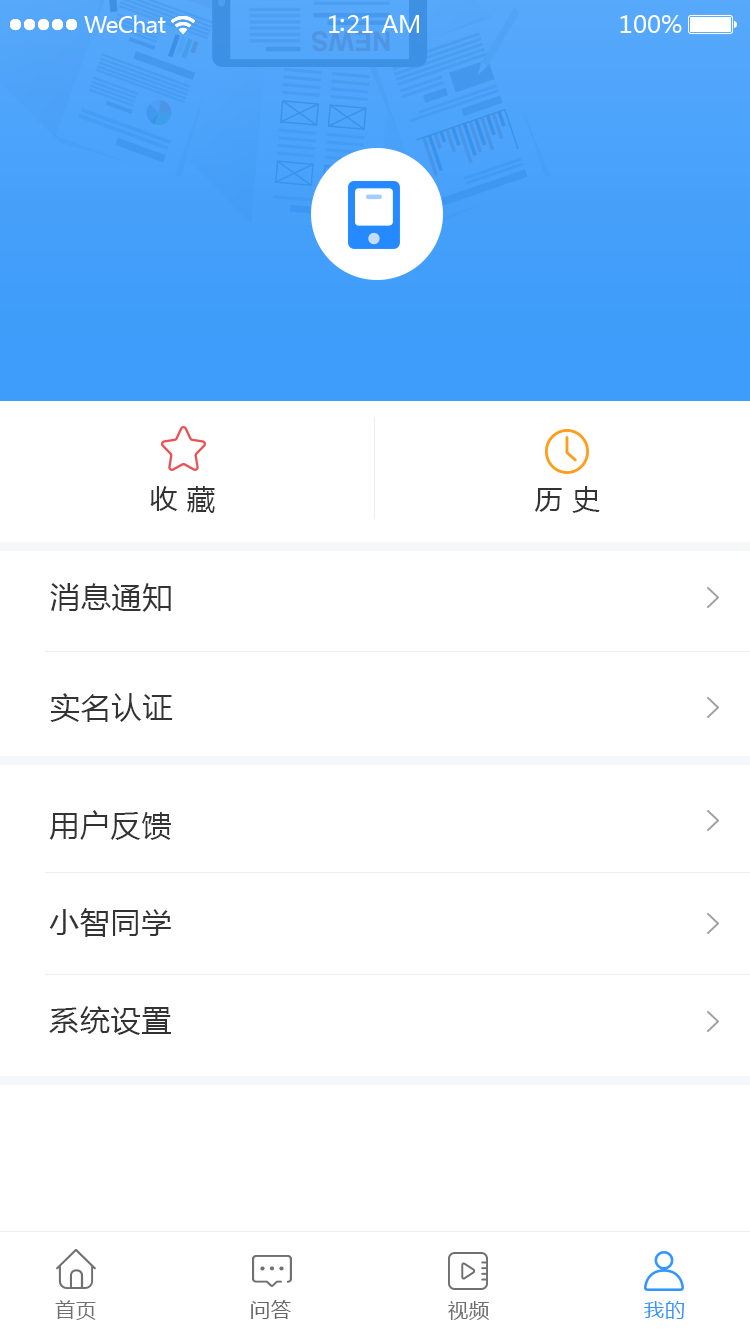
<style>
.page{position:relative;width:750px;height:1335px;background:#ffffff}
.page>*{position:absolute;margin:0}
.t1{font:28px "MicrosoftYaHei";letter-spacing:0.025em;color:#333333}
.t2{font:30px "MicrosoftYaHei";letter-spacing:0.025em;color:#333333}
.t3{font:20px "MicrosoftYaHei";letter-spacing:0.05em;color:#707070}
.t4{font:20px "MicrosoftYaHei";letter-spacing:0.05em;color:#666666}
.t5{font:20px "MicrosoftYaHei";letter-spacing:0.05em;color:#3296fa}
</style>
<div class="page">
<p class="t1" style="left:150px;top:486px;width:65px;height:27px">收 藏</p>
<p class="t1" style="left:534px;top:486px;width:66px;height:27px">历 史</p>
<p class="t2" style="left:50px;top:583px;width:121px;height:29px">消息通知</p>
<p class="t2" style="left:50px;top:693px;width:123px;height:29px">实名认证</p>
<p class="t2" style="left:49px;top:810px;width:122px;height:30px">用户反馈</p>
<p class="t2" style="left:49px;top:908px;width:122px;height:29px">小智同学</p>
<p class="t2" style="left:49px;top:1006px;width:122px;height:29px">系统设置</p>
<p class="t3" style="left:55px;top:1300px;width:41px;height:20px">首页</p>
<p class="t4" style="left:251px;top:1300px;width:40px;height:19px">问答</p>
<p class="t3" style="left:448px;top:1301px;width:41px;height:19px">视频</p>
<p class="t5" style="left:644px;top:1301px;width:40px;height:18px">我的</p>
</div>
